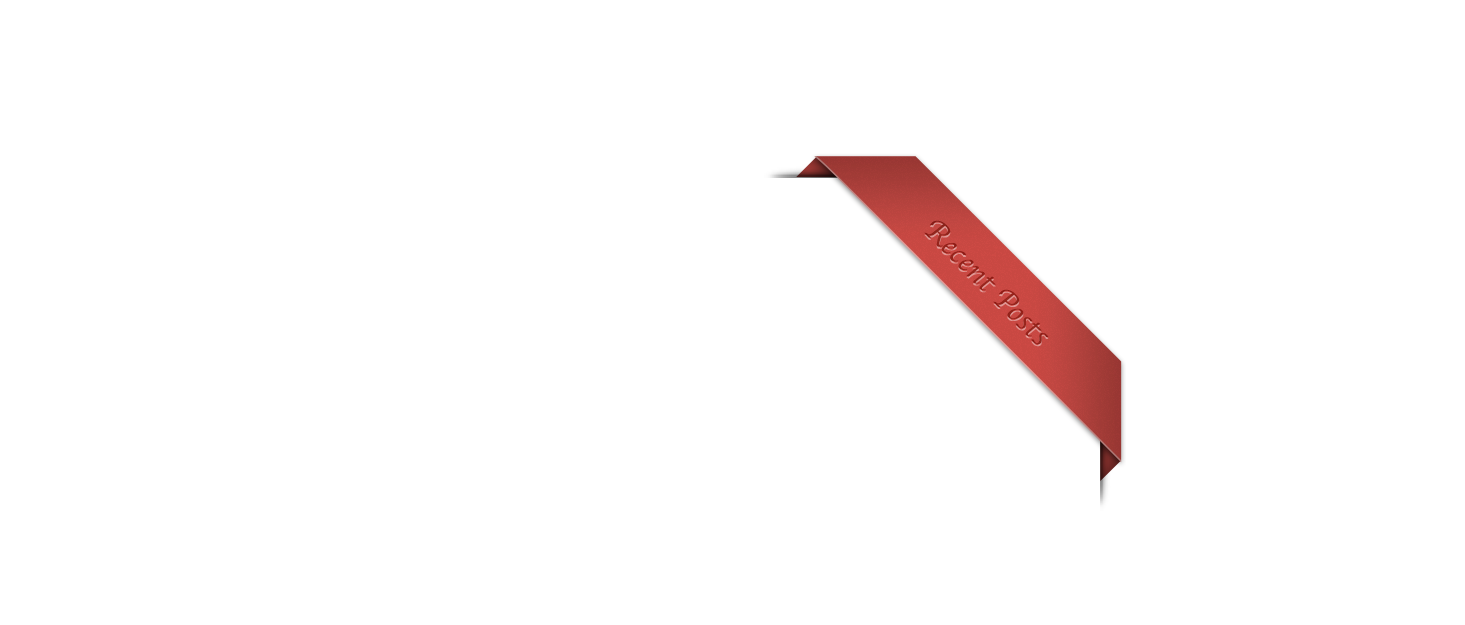
<style>
.page{position:relative;width:1465px;height:625px;background:#ffffff}
.page>*{position:absolute;margin:0}
.t1{font:31.3px "Apple-Chancery";color:#95241b}
</style>
<div class="page">
<p class="t1" style="left:924px;top:220px;width:125px;height:125px;rotate:45deg">Recent Posts</p>
</div>
